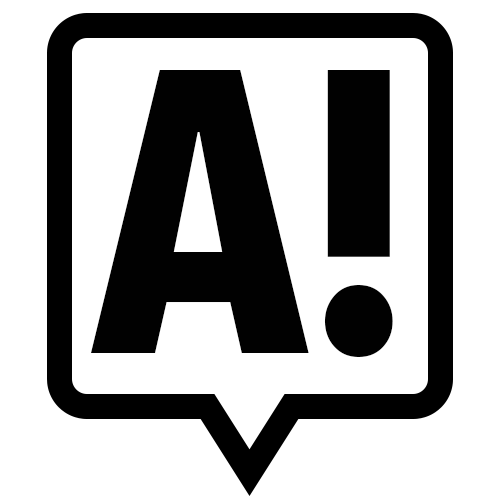
<style>
.page{position:relative;width:500px;height:500px;background:#ffffff}
.page>*{position:absolute;margin:0}
.t1{font:400px "AvenirNextCondensed-Bold";letter-spacing:-0.04em;color:#010101}
</style>
<div class="page">
<p class="t1" style="left:91px;top:70px;width:302px;height:287px">A!</p>
</div>
